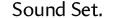
<style>
.page{position:relative;width:116px;height:18px;background:#ffffff}
.page>*{position:absolute;margin:0}
.t1{font:20px "Amira-Roman";color:#000000}
</style>
<div class="page">
<p class="t1" style="left:12px;top:1px;width:90px;height:16px;opacity:0.96">Sound Set.</p>
</div>
